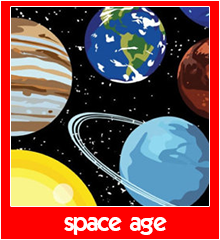
<style>
.page{position:relative;width:220px;height:240px;background:#ff0000}
.page>*{position:absolute;margin:0}
.t1{font:24px "ELEGANCE";color:#ffffff}
</style>
<div class="page">
<p class="t1" style="left:64px;top:217px;width:103px;height:18px">space age</p>
</div>
